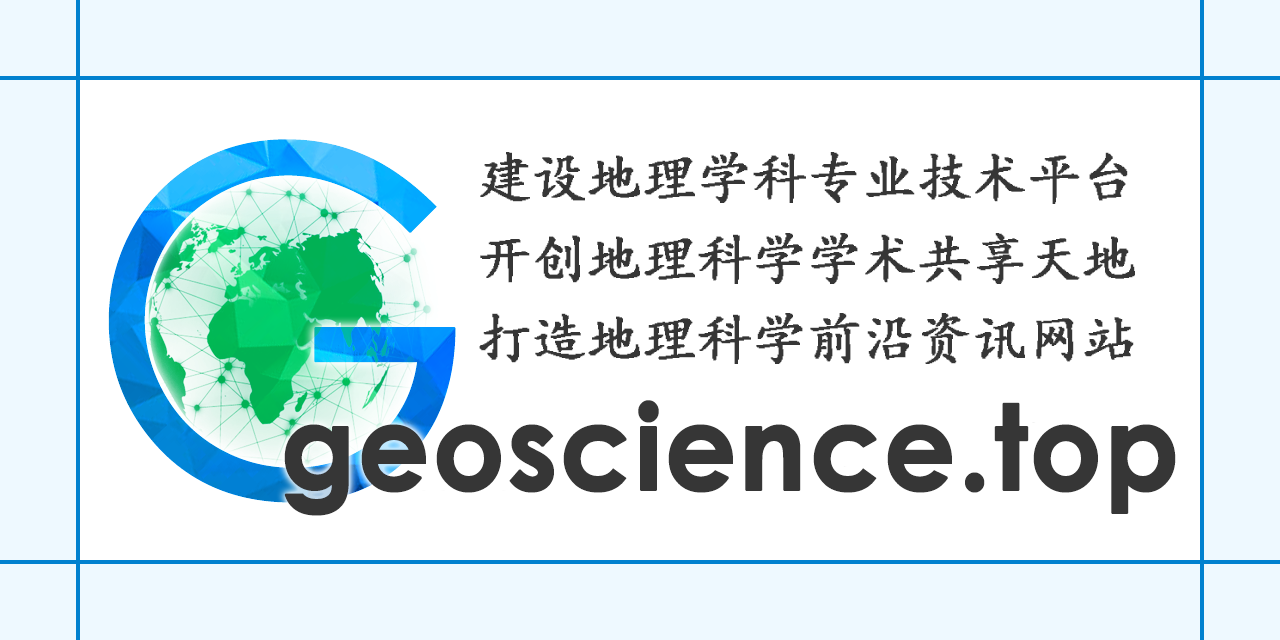
<style>
.page{position:relative;width:1280px;height:640px;background:#ffffff}
.page>*{position:absolute;margin:0}
.t1{font:479.4px "CenturyGothic";letter-spacing:0.1em;font-weight:bold;scale:0.94 1}
.t2{font:55.4px/80.8px "¿¬Ìå";color:#363636;font-weight:bold}
.t3{font:118.4px "CenturyGothic-Bold";color:#363636;font-weight:bold;scale:0.95 1}
</style>
<div class="page">
<p class="t1" style="left:108px;top:139px;width:348px;height:364px">G</p>
<p class="t2" style="left:479px;top:152px;width:656px;height:212px">建设地理学科专业技术平台<br>开创地理科学学术共享天地<br>打造地理科学前沿资讯网站</p>
<p class="t3" style="left:284px;top:400px;width:892px;height:116px">geoscience.top</p>
</div>
